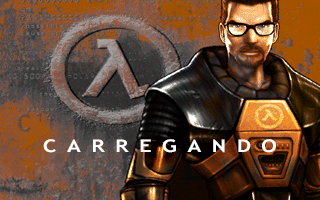
<style>
.page{position:relative;width:320px;height:200px}
.page>*{position:absolute;margin:0}
.t1{font:17.6px "TrebuchetMS-Bold";letter-spacing:0.465em;color:#ffffff;scale:1.26 1}
</style>
<div class="page">
<p class="t1" style="left:43px;top:139px;width:233px;height:14px">CARREGANDO</p>
</div>
